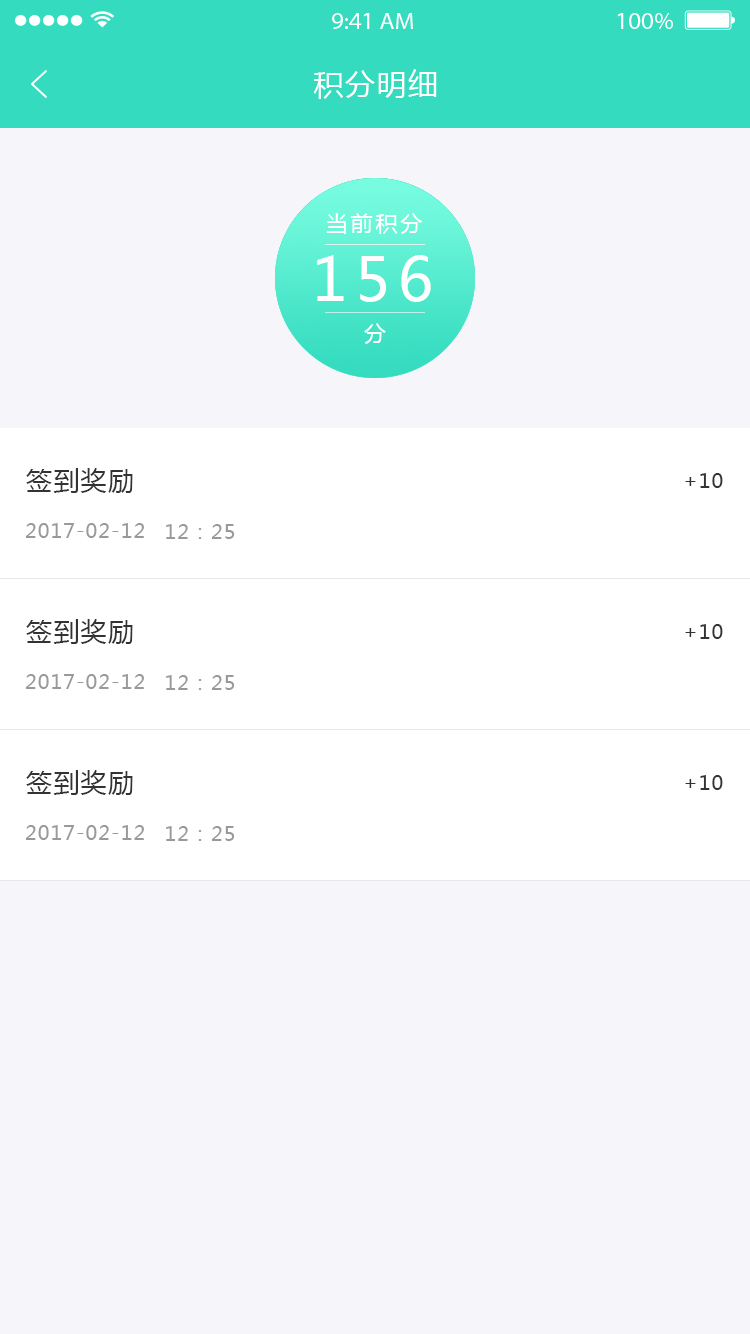
<style>
.page{position:relative;width:750px;height:1334px;background:#f6f5fa}
.page>*{position:absolute;margin:0}
.t1{font:30px "MicrosoftYaHei";letter-spacing:0.05em;color:#ffffff}
.t2{font:22px "MicrosoftYaHei";letter-spacing:0.13em;color:#ffffff}
.t3{font:60px "MicrosoftYaHei";letter-spacing:0.13em;color:#ffffff}
.t4{font:26px "MicrosoftYaHei";letter-spacing:0.05em;color:#333333}
.t5{font:20px "MicrosoftYaHei";letter-spacing:0.05em;color:#333333}
.t6{font:20px "MicrosoftYaHei";letter-spacing:0.05em;color:#999999}
</style>
<div class="page">
<p class="t1" style="left:314px;top:69px;width:123px;height:30px">积分明细</p>
<p class="t2" style="left:326px;top:213px;width:97px;height:21px">当前积分</p>
<p class="t3" style="left:317px;top:255px;width:114px;height:47px">156</p>
<p class="t2" style="left:364px;top:323px;width:22px;height:21px">分</p>
<p class="t4" style="left:26px;top:468px;width:107px;height:25px">签到奖励</p>
<p class="t5" style="left:685px;top:473px;width:38px;height:15px">+10</p>
<p class="t6" style="left:25px;top:523px;width:119px;height:15px">2017-02-12</p>
<p class="t6" style="left:166px;top:524px;width:69px;height:15px">12：25</p>
<p class="t4" style="left:26px;top:619px;width:107px;height:25px">签到奖励</p>
<p class="t5" style="left:685px;top:624px;width:38px;height:15px">+10</p>
<p class="t6" style="left:25px;top:674px;width:119px;height:15px">2017-02-12</p>
<p class="t6" style="left:166px;top:675px;width:69px;height:15px">12：25</p>
<p class="t4" style="left:26px;top:770px;width:107px;height:25px">签到奖励</p>
<p class="t5" style="left:685px;top:775px;width:38px;height:15px">+10</p>
<p class="t6" style="left:25px;top:825px;width:119px;height:15px">2017-02-12</p>
<p class="t6" style="left:166px;top:826px;width:69px;height:15px">12：25</p>
</div>
